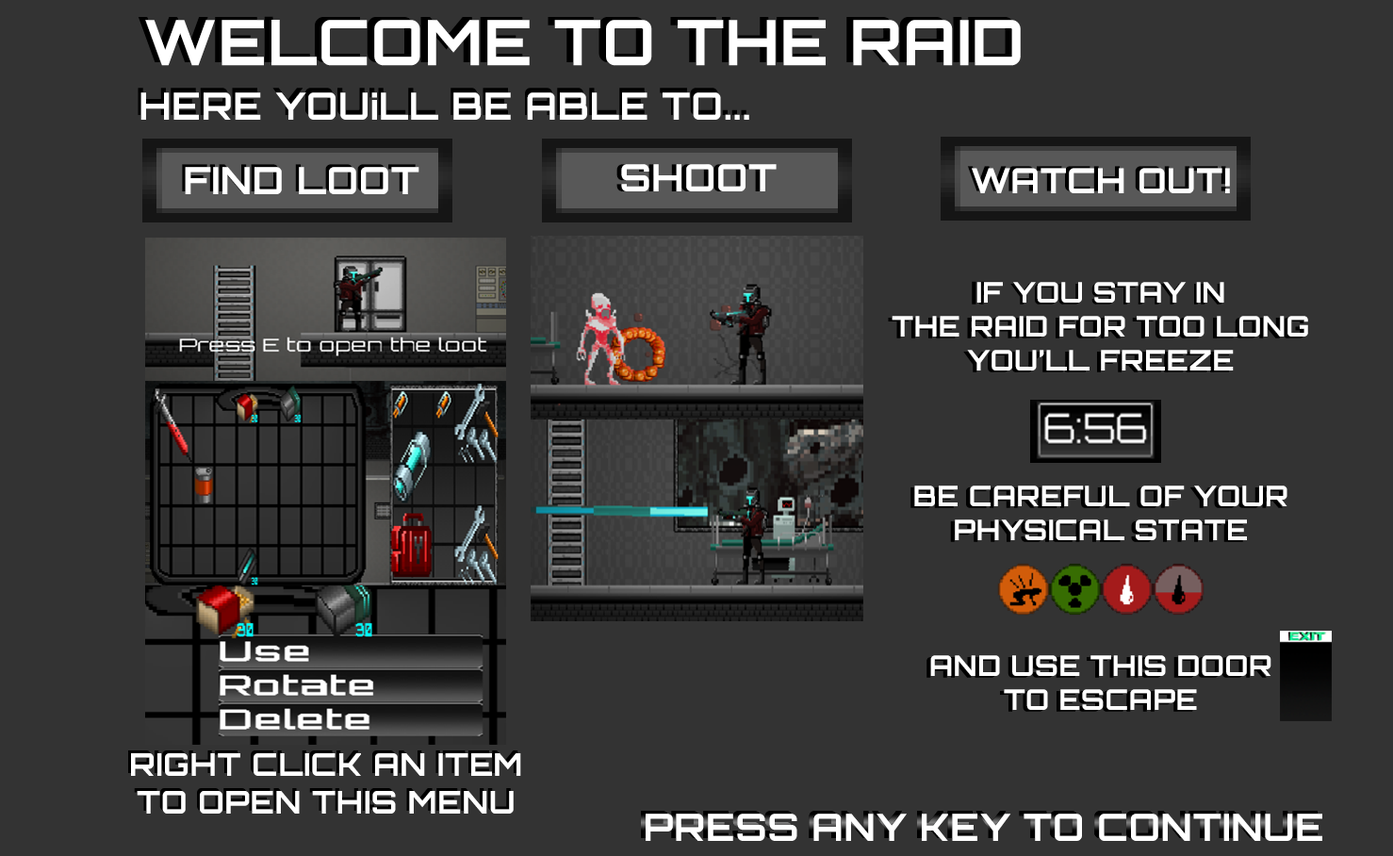
<style>
.page{position:relative;width:1393px;height:856px;background:#333333}
.page>*{position:absolute;margin:0}
.t1{font:62.8px "Orbitron-Bold";letter-spacing:0.02em;color:#ffffff}
.t2{font:37.7px "Orbitron-Bold";letter-spacing:0.02em;color:#ffffff}
.t3{font:28.3px "Orbitron-Bold";letter-spacing:0.02em;color:#ffffff}
.t4{font:34.6px "Orbitron-Bold";letter-spacing:0.02em;color:#ffffff}
.t5{font:31.4px "Orbitron-Bold";letter-spacing:0.02em;color:#ffffff}
</style>
<div class="page">
<p class="t1" style="left:145px;top:20px;width:876px;height:46px">WELCOME TO THE RAID</p>
<p class="t2" style="left:140px;top:92px;width:609px;height:28px">HERE YOU¡LL BE ABLE TO...</p>
<p class="t2" style="left:185px;top:167px;width:234px;height:27px">FIND LOOT</p>
<p class="t2" style="left:621px;top:164px;width:156px;height:27px">SHOOT</p>
<p class="t3" style="left:892px;top:168px;width:416px;height:542px;text-align:center"><span class="t4">WATCH OUT!<br><br><br></span>IF YOU STAY IN<br>THE RAID FOR TOO LONG<br>YOU’LL FREEZE<br><br><br><br>BE CAREFUL OF YOUR<br>PHYSICAL STATE<br><br><br><br>AND USE THIS DOOR<br>TO ESCAPE</p>
<p class="t5" style="left:131px;top:753px;width:390px;height:60px;text-align:center">RIGHT CLICK AN ITEM<br>TO OPEN THIS MENU</p>
<p class="t2" style="left:646px;top:813px;width:676px;height:28px">PRESS ANY KEY TO CONTINUE</p>
</div>
